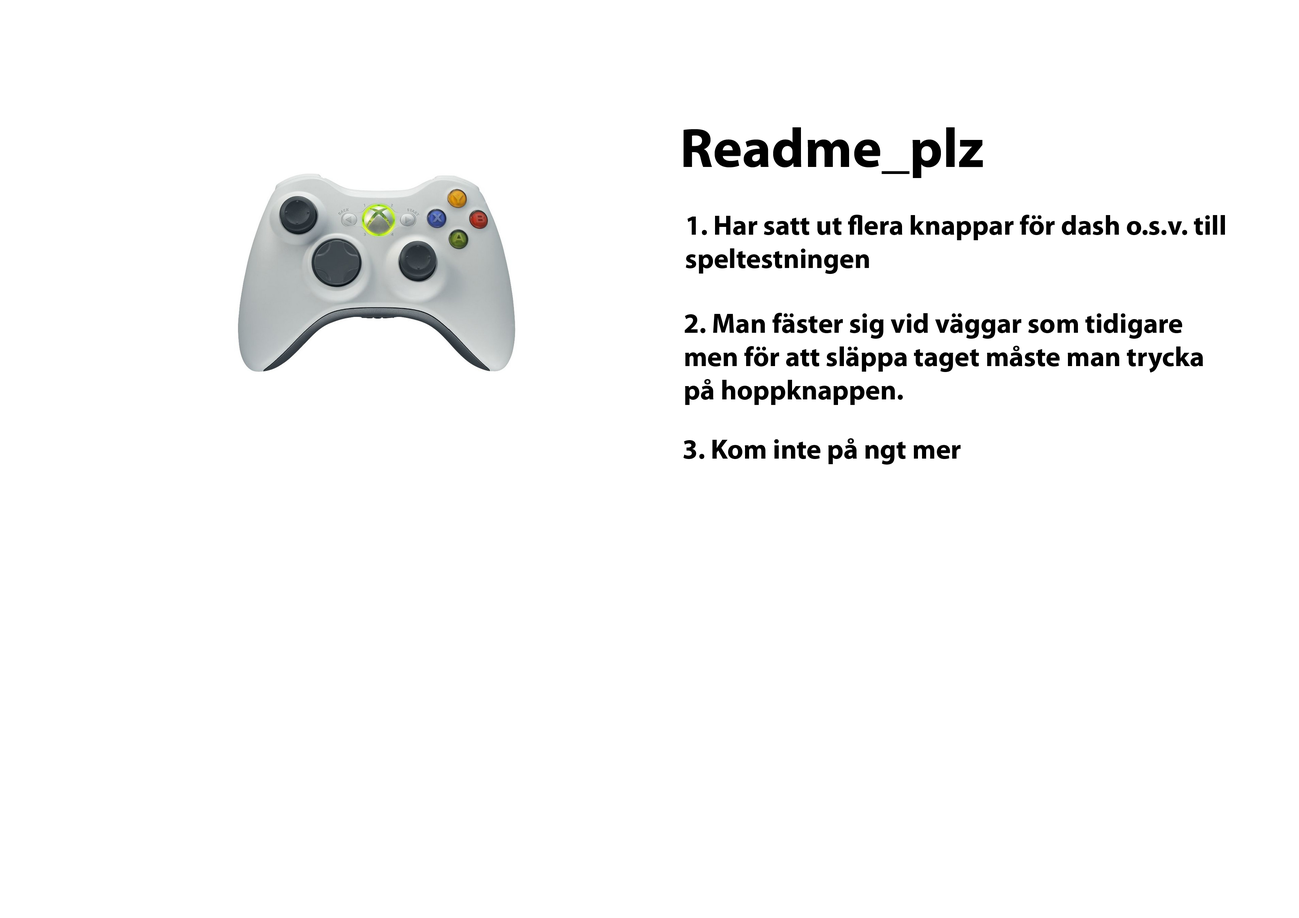
<style>
.page{position:relative;width:1299px;height:918px;background:#ffffff}
.page>*{position:absolute;margin:0}
.t1{font:55.5px "MyriadPro-Bold";color:#000000}
.t2{font:27.8px "MyriadPro-Bold";color:#000000}
</style>
<div class="page">
<p class="t1" style="left:683px;top:127px;width:300px;height:51px">Readme_plz</p>
<p class="t2" style="left:686px;top:215px;width:539px;height:59px">1. Har satt ut flera knappar för dash o.s.v. till <br>speltestningen</p>
<p class="t2" style="left:685px;top:313px;width:518px;height:92px">2. Man fäster sig vid väggar som tidigare<br>men för att släppa taget måste man trycka<br>på hoppknappen.</p>
<p class="t2" style="left:683px;top:438px;width:278px;height:27px">3. Kom inte på ngt mer</p>
</div>
